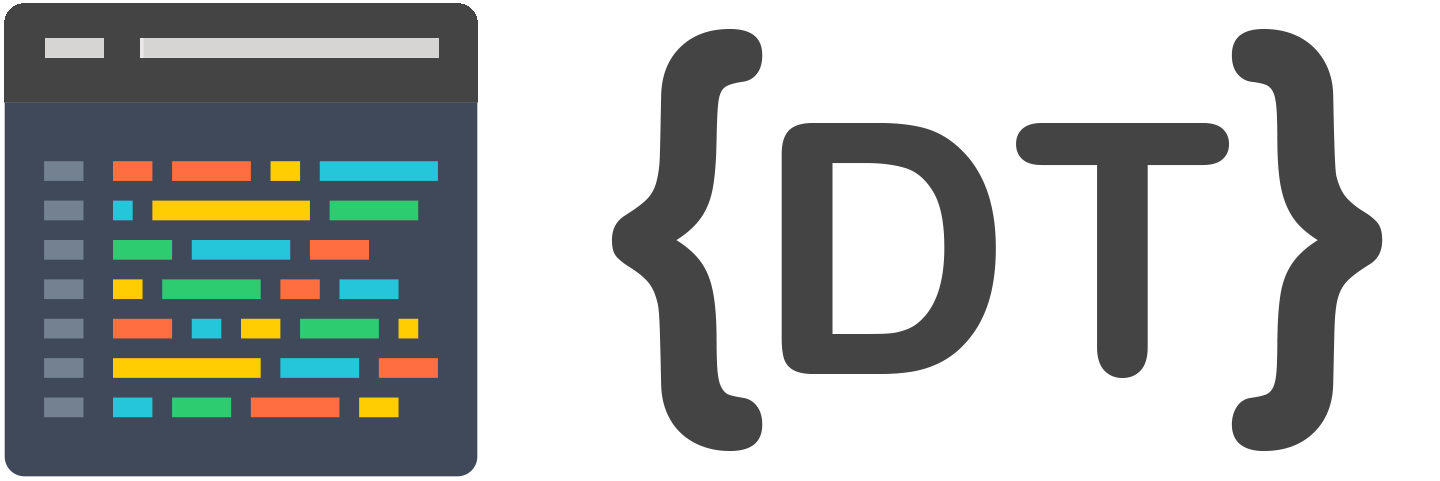
<style>
.page{position:relative;width:1440px;height:481px;background:#ffffff}
.page>*{position:absolute;margin:0}
.t1{font:450px "ArialRoundedMTBold";color:#444444}
.t2{font:350px "ArialRoundedMTBold";color:#444444}
</style>
<div class="page">
<p class="t1" style="left:611px;top:29px;width:772px;height:422px">{    }</p>
<p class="t2" style="left:781px;top:123px;width:448px;height:255px">DT</p>
</div>
